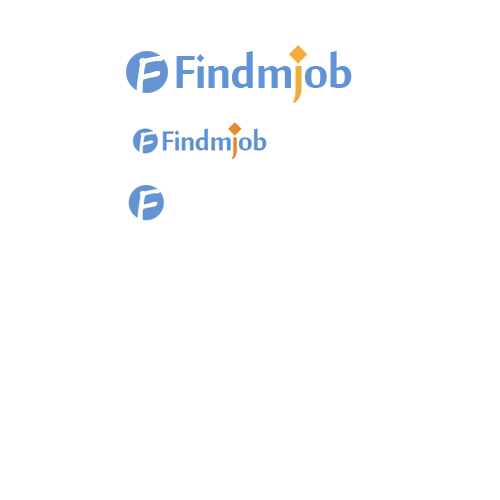
<style>
.page{position:relative;width:500px;height:500px;background:#ffffff}
.page>*{position:absolute;margin:0}
.t1{font:72px "MoolBoran";letter-spacing:-0.025em;color:#6293d6}
.t2{font:72px "MoolBoran";letter-spacing:-0.025em;color:#f1ae3a}
.t3{font:48px "SegoeScript-Bold";color:#fefefe}
</style>
<div class="page">
<p class="t1" style="left:176px;top:51px;width:176px;height:52px">Findm<span class="t2">j</span>ob</p>
<p class="t3" style="left:136px;top:56px;width:28px;height:37px">F</p>
</div>
